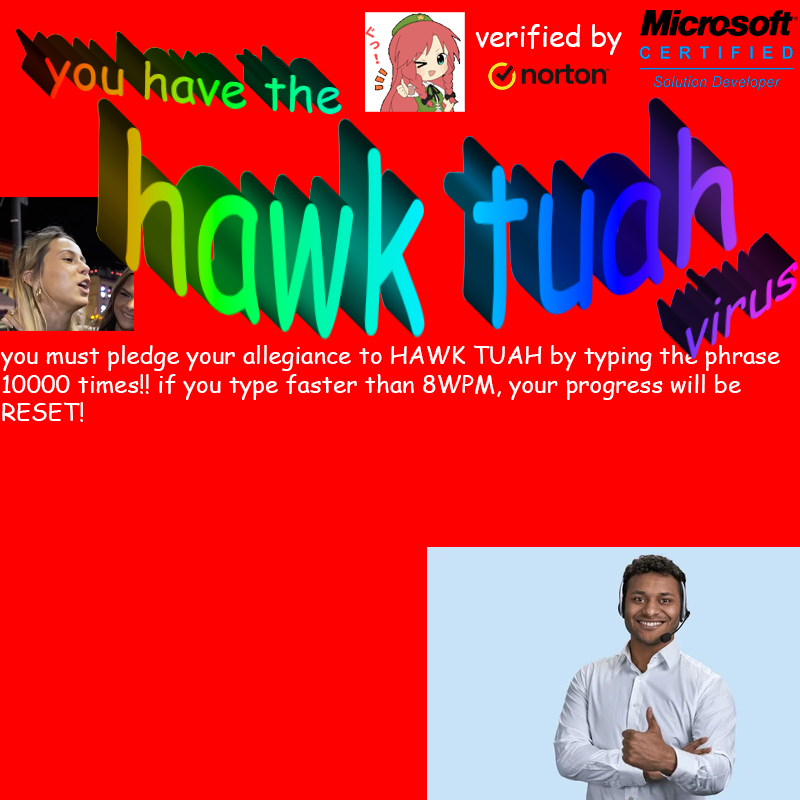
<style>
.page{position:relative;width:800px;height:800px;background:#ff0000}
.page>*{position:absolute;margin:0}
.t1{font:28.6px "ComicSansMS";color:#ffffff}
.t2{font:24px "ComicSansMS";color:#ffffff}
</style>
<div class="page">
<p class="t1" style="left:475px;top:24px;width:147px;height:31px">verified by</p>
<p class="t2" style="left:1px;top:345px;width:779px;height:77px">you must pledge your allegiance to HAWK TUAH by typing the phrase<br>10000 times!! if you type faster than 8WPM, your progress will be<br>RESET!</p>
</div>
